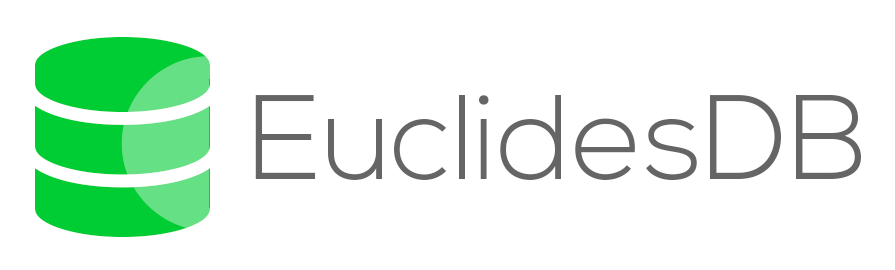
<style>
.page{position:relative;width:895px;height:270px;background:#ffffff}
.page>*{position:absolute;margin:0}
.t1{font:120px "NexaLight";color:#656565}
</style>
<div class="page">
<p class="t1" style="left:255px;top:95px;width:606px;height:86px">EuclidesDB</p>
</div>
